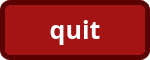
<style>
.page{position:relative;width:150px;height:60px;background:#a51414}
.page>*{position:absolute;margin:0}
.t1{font:25px "OpenSans-Bold";color:#ffffff}
</style>
<div class="page">
<p class="t1" style="left:50px;top:20px;width:50px;height:25px">quit</p>
</div>
